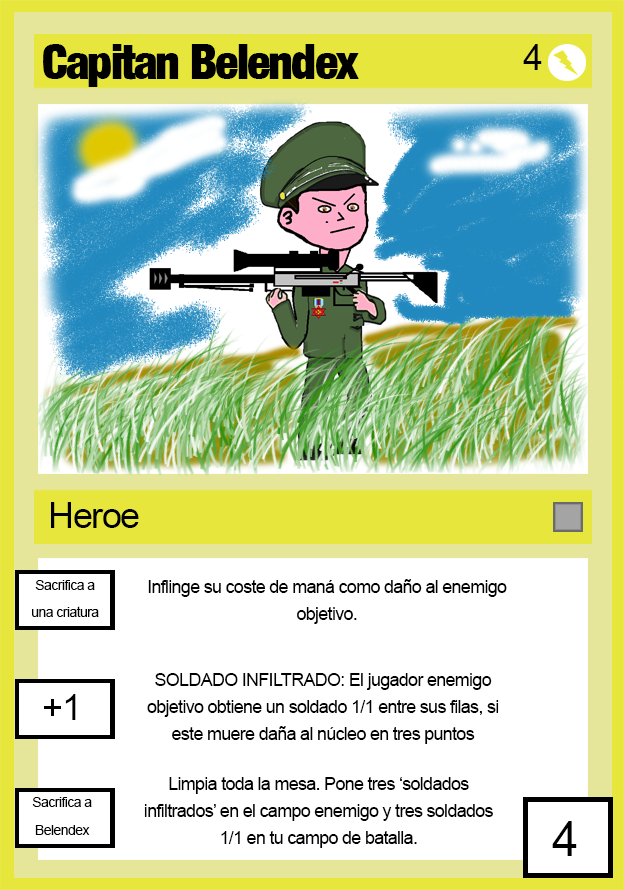
<style>
.page{position:relative;width:624px;height:890px;background:#ffffff}
.page>*{position:absolute;margin:0}
.t1{font:48px "Harvest";letter-spacing:-0.04em;color:#000000}
.t2{font:36px "ArialMT";letter-spacing:-0.04em;color:#000000}
.t3{font:14px/27px "ArialMT";letter-spacing:-0.04em;color:#000000}
.t4{font:18px/27px "ArialMT";letter-spacing:-0.04em;color:#000000}
.t5{font:48px "ArialMT";letter-spacing:-0.04em;color:#000000}
</style>
<div class="page">
<p class="t1" style="left:43px;top:44px;width:316px;height:43px">Capitan Belendex</p>
<p class="t2" style="left:523px;top:44px;width:19px;height:26px">4</p>
<p class="t2" style="left:51px;top:502px;width:88px;height:26px">Heroe</p>
<p class="t3" style="left:32px;top:580px;width:67px;height:37px;text-align:center">Sacrifica a una criatura</p>
<p class="t4" style="left:148px;top:579px;width:359px;height:45px;text-align:center">Inflinge su coste de maná como daño al enemigo objetivo.</p>
<p class="t4" style="left:147px;top:673px;width:352px;height:71px;text-align:center">SOLDADO INFILTRADO: El jugador enemigo objetivo obtiene un soldado 1/1 entre sus filas, si este muere daña al núcleo en tres puntos</p>
<p class="t2" style="left:44px;top:694px;width:32px;height:26px">+1</p>
<p class="t4" style="left:144px;top:777px;width:349px;height:71px;text-align:center">Limpia toda la mesa. Pone tres ‘soldados infiltrados’ en el campo enemigo y tres soldados 1/1 en tu campo de batalla.</p>
<p class="t3" style="left:32px;top:797px;width:60px;height:38px;text-align:center">Sacrifica a Belendex</p>
<p class="t5" style="left:552px;top:821px;width:25px;height:35px">4</p>
</div>
